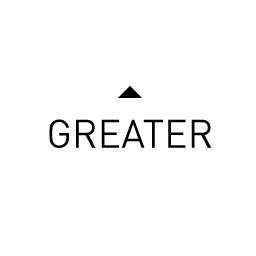
<style>
.page{position:relative;width:256px;height:256px;background:#ffffff}
.page>*{position:absolute;margin:0}
.t1{font:39.2px "DIN-Regular";color:#000000}
</style>
<div class="page">
<p class="t1" style="left:49px;top:119px;width:163px;height:29px">GREATER</p>
</div>
